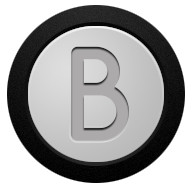
<style>
.page{position:relative;width:190px;height:190px;background:#ffffff}
.page>*{position:absolute;margin:0}
.t1{font:120px "Comfortaa-Bold";color:#acaaaa}
</style>
<div class="page">
<p class="t1" style="left:71px;top:46px;width:58px;height:95px">B</p>
</div>
